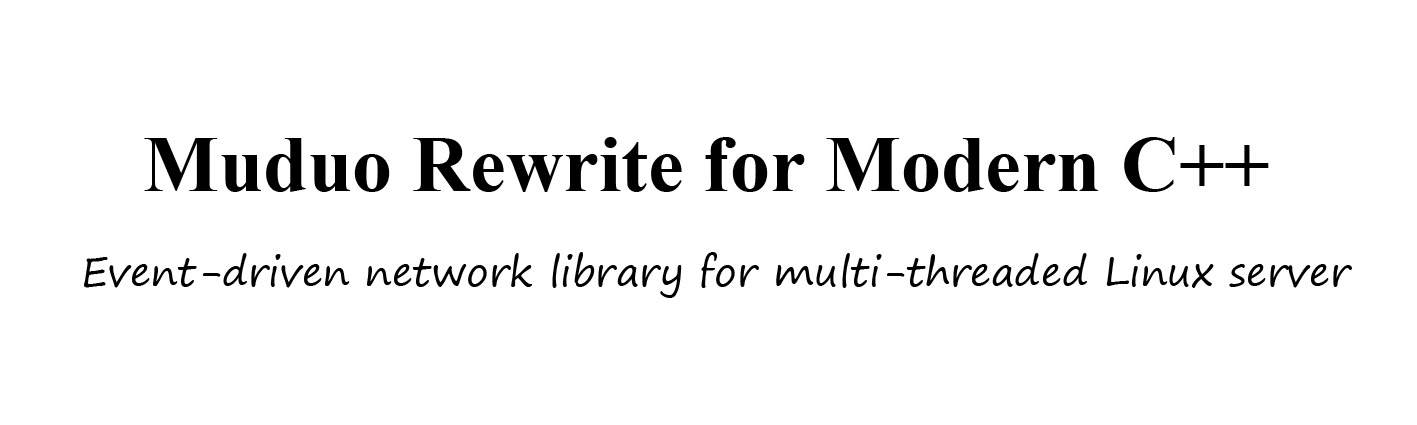
<style>
.page{position:relative;width:1417px;height:425px;background:#ffffff}
.page>*{position:absolute;margin:0}
.t1{font:80px "TimesNewRomanPS-BoldMT";color:#000000}
.t2{font:40px "SegoePrint";color:#000000}
</style>
<div class="page">
<p class="t1" style="left:144px;top:137px;width:1125px;height:55px">Muduo Rewrite for Modern C++</p>
<p class="t2" style="left:84px;top:252px;width:1268px;height:46px">Event-driven network library for multi-threaded Linux server</p>
</div>
